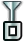
<style>
.page{position:relative;width:24px;height:42px;background:#ffffff}
.page>*{position:absolute;margin:0}
.t1{font:18.7px "KafuTechnoStd-U"}
</style>
<div class="page">
<p class="t1" style="left:5px;top:23px;width:16px;height:16px">O</p>
</div>
